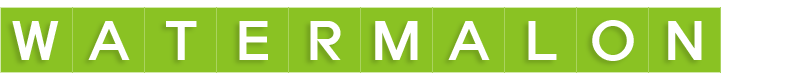
<style>
.page{position:relative;width:800px;height:73px;background:#8ac223}
.page>*{position:absolute;margin:0}
.t1{font:50px "ExpoM-HM";color:#ffffff}
</style>
<div class="page">
<p class="t1" style="left:12px;top:21px;width:47px;height:39px">W</p>
<p class="t1" style="left:88px;top:21px;width:42px;height:39px">A</p>
<p class="t1" style="left:166px;top:21px;width:31px;height:39px">T</p>
<p class="t1" style="left:239px;top:21px;width:29px;height:39px">E</p>
<p class="t1" style="left:310px;top:21px;width:31px;height:39px">R</p>
<p class="t1" style="left:375px;top:21px;width:43px;height:39px">M</p>
<p class="t1" style="left:448px;top:21px;width:42px;height:39px">A</p>
<p class="t1" style="left:528px;top:21px;width:29px;height:39px">L</p>
<p class="t1" style="left:592px;top:20px;width:42px;height:41px">O</p>
<p class="t1" style="left:668px;top:21px;width:34px;height:39px">N</p>
</div>
